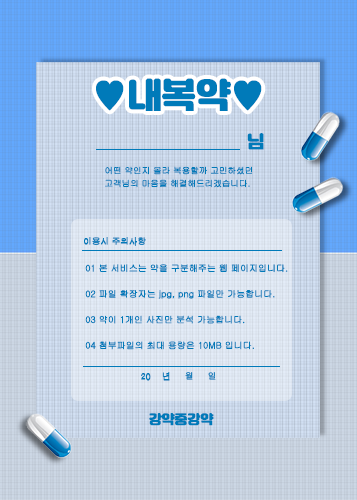
<style>
.page{position:relative;width:357px;height:500px}
.page>*{position:absolute;margin:0}
.t1{font:34.3px "Jalnan";letter-spacing:-0.025em;color:#0079b9;font-weight:bold}
.t2{font:17.1px "Jalnan";letter-spacing:-0.025em;color:#0079b9;font-weight:bold}
.t3{font:8.6px/12.9px "Gulim";letter-spacing:-0.025em;color:#007ab9;font-weight:bold}
.t4{font:8.6px "Gulim";letter-spacing:-0.025em;color:#007ab9;font-weight:bold}
.t5{font:9px/12.9px "Gulim";letter-spacing:-0.025em;color:#007ab9;font-weight:bold}
.t6{font:8.6px "H2gprM";letter-spacing:-0.025em;color:#007ab9;font-weight:bold}
.t7{font:12.9px "Jalnan";letter-spacing:-0.025em;color:#007ab9;font-weight:bold}
</style>
<div class="page">
<p class="t1" style="left:96px;top:78px;width:166px;height:33px">♥내복약♥</p>
<p class="t2" style="left:247px;top:133px;width:17px;height:17px">님</p>
<p class="t3" style="left:105px;top:166px;width:148px;height:22px">어떤 약인지 몰라 복용할까 고민하셨던<br>고객님의 마음을 해결해드리겠습니다.</p>
<p class="t4" style="left:84px;top:237px;width:62px;height:9px">이용시 주의사항</p>
<p class="t5" style="left:85px;top:264px;width:203px;height:86px">01 본 서비스는 약을 구분해주는 웹 페이지입니다.<br><br>02 파일 확장자는 jpg, png 파일만 가능합니다.<br><br>03 약이 1개인 사진만 분석 가능합니다.<br><br>04 첨부파일의 최대 용량은 10MB 입니다.</p>
<p class="t6" style="left:141px;top:372px;width:75px;height:9px">20    년     월     일</p>
<p class="t7" style="left:149px;top:413px;width:65px;height:13px">강약중강약</p>
</div>
